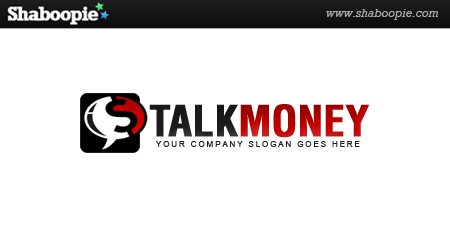
<style>
.page{position:relative;width:450px;height:250px;background:#ffffff}
.page>*{position:absolute;margin:0}
.t1{font:41.7px "Helvetica-Condensed-Bold";letter-spacing:-0.01em;color:#c30000;text-transform:uppercase;font-weight:bold}
.t2{font:41.7px "Helvetica-Condensed-Bold";letter-spacing:-0.01em;color:#1e1e1e;text-transform:uppercase;font-weight:bold}
.t3{font:8.3px "ArialMT";letter-spacing:0.2em;color:#1e1e1e;text-transform:uppercase}
</style>
<div class="page">
<p class="t1" style="left:149px;top:104px;width:220px;height:34px"><span class="t2">TALK</span>MONEY</p>
<p class="t3" style="left:156px;top:141px;width:204px;height:6px">YOUR COMPANY SLOGAN GOES HERE</p>
</div>
